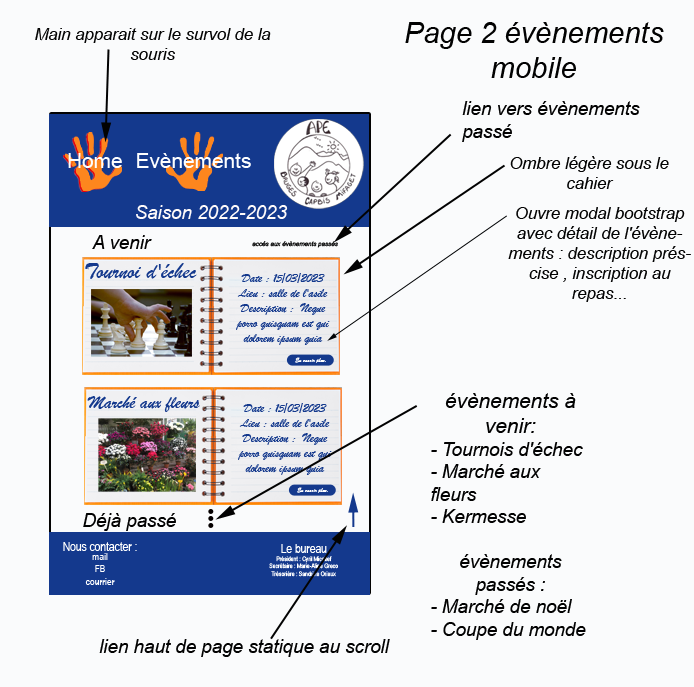
<style>
.page{position:relative;width:694px;height:687px;background:#fafbfc}
.page>*{position:absolute;margin:0}
.t1{font:16.7px "Arial-ItalicMT";color:#020202}
.t2{font:29.2px "Arial-ItalicMT";color:#020202}
.t3{font:18.8px "Arial-ItalicMT";color:#020202}
.t4{font:20.8px "ArialMT";color:#fdfeff}
.t5{font:18.8px "Arial-ItalicMT";color:#fefafa}
.t6{font:6.2px "Arial-ItalicMT";color:#020202}
.t7{font:22.9px "BrushScriptMT";color:#14398d}
.t8{font:12.5px "BrushScriptMT";color:#14398d}
.t9{font:6.2px "BrushScriptMT";color:#ffffff}
.t10{font:6.2px "BrushScriptMT";color:#14398d}
.t11{font:18.8px "BrushScriptMT";color:#14398d}
.t12{font:18.7px "Arial-ItalicMT";color:#020202}
.t13{font:20.8px "Arial-ItalicMT";color:#020202}
.t14{font:12.5px "ArialNarrow";color:#ffffff}
.t15{font:6.2px "ArialNarrow";color:#ffffff}
.t16{font:10.4px "ArialNarrow";color:#ffffff}
</style>
<div class="page">
<p class="t1" style="left:35px;top:28px;width:236px;height:32px;text-align:center">Main apparait sur le survol de la souris</p>
<p class="t2" style="left:405px;top:22px;width:259px;height:56px;text-align:center">Page 2 évènements<br>mobile</p>
<p class="t3" style="left:462px;top:101px;width:178px;height:41px">lien vers évènements passé</p>
<p class="t4" style="left:68px;top:153px;width:54px;height:15px">Home</p>
<p class="t4" style="left:137px;top:153px;width:114px;height:15px">Evènements</p>
<p class="t1" style="left:510px;top:156px;width:159px;height:33px;text-align:center">Ombre légère sous le cahier</p>
<p class="t5" style="left:136px;top:205px;width:152px;height:14px">Saison 2022-2023</p>
<p class="t1" style="left:508px;top:207px;width:183px;height:95px;text-align:center">Ouvre modal bootstrap<br>avec détail de l'évènements : description préscise , inscription au repas...</p>
<p class="t3" style="left:92px;top:235px;width:60px;height:14px">A venir</p>
<p class="t6" style="left:252px;top:241px;width:86px;height:7px">accés aux évènements passés</p>
<p class="t7" style="left:85px;top:263px;width:112px;height:16px">Tournoi d'échec</p>
<p class="t8" style="left:236px;top:273px;width:94px;height:72px;text-align:center">Date : 15/03/2023<br>Lieu : salle de l'asile<br>Description :  Neque porro quisquam est qui dolorem ipsum quia</p>
<p class="t9" style="left:295px;top:357px;width:35px;height:6px">En savoir plus.<span class="t10">..</span></p>
<p class="t11" style="left:87px;top:396px;width:113px;height:16px">Marché aux fleurs</p>
<p class="t12" style="left:431px;top:393px;width:155px;height:247px;text-align:center"><span class="t13">évènements à venir:<br></span>- Tournois d'échec<br>- Marché aux fleurs<br>- Kermesse<br><br>évènements passés :<br>- Marché de noël<br>- Coupe du monde</p>
<p class="t8" style="left:238px;top:403px;width:94px;height:72px;text-align:center">Date : 15/03/2023<br>Lieu : salle de l'asile<br>Description :  Neque porro quisquam est qui dolorem ipsum quia</p>
<p class="t9" style="left:297px;top:487px;width:35px;height:6px">En savoir plus.<span class="t10">..</span></p>
<p class="t3" style="left:83px;top:513px;width:93px;height:18px">Déjà passé</p>
<p class="t14" style="left:63px;top:542px;width:74px;height:9px">Nous contacter :</p>
<p class="t15" style="left:269px;top:544px;width:69px;height:33px;text-align:center"><span class="t14">Le bureau <br></span>Président : Cyril Micallef<br>Secrétaire : Marie-Aline Greco<br>Trésorière : Sandrine Orieux</p>
<p class="t16" style="left:85px;top:553px;width:30px;height:32px;text-align:center">mail<br>FB<br>courrier</p>
<p class="t3" style="left:99px;top:639px;width:291px;height:18px">lien haut de page statique au scroll</p>
</div>
